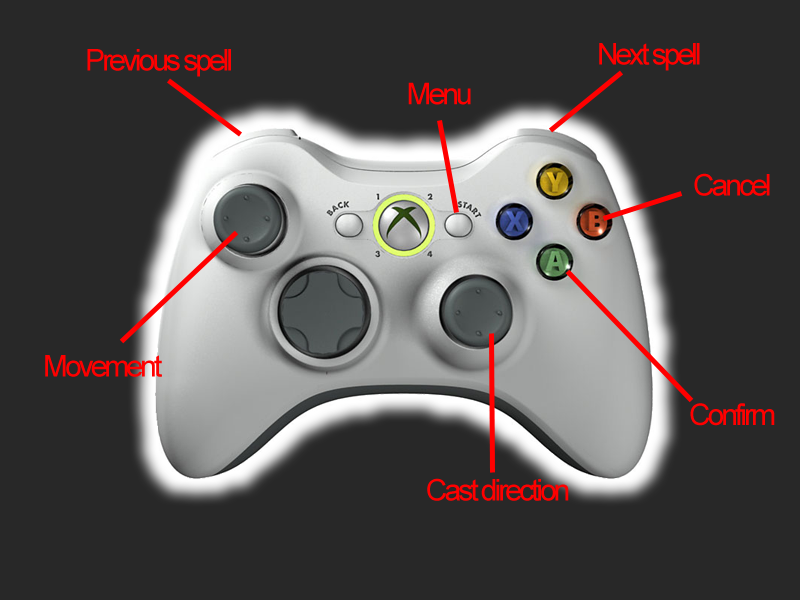
<style>
.page{position:relative;width:800px;height:600px;background:#282828}
.page>*{position:absolute;margin:0}
.t1{font:30px "ArialMT";letter-spacing:-0.1em;color:#ff0000}
</style>
<div class="page">
<p class="t1" style="left:87px;top:49px;width:144px;height:28px">Previous spell</p>
<p class="t1" style="left:599px;top:43px;width:101px;height:28px">Next spell</p>
<p class="t1" style="left:408px;top:82px;width:63px;height:23px">Menu</p>
<p class="t1" style="left:694px;top:173px;width:76px;height:23px">Cancel</p>
<p class="t1" style="left:45px;top:355px;width:117px;height:22px">Movement</p>
<p class="t1" style="left:690px;top:403px;width:85px;height:23px">Confirm</p>
<p class="t1" style="left:427px;top:478px;width:142px;height:23px">Cast direction</p>
</div>
